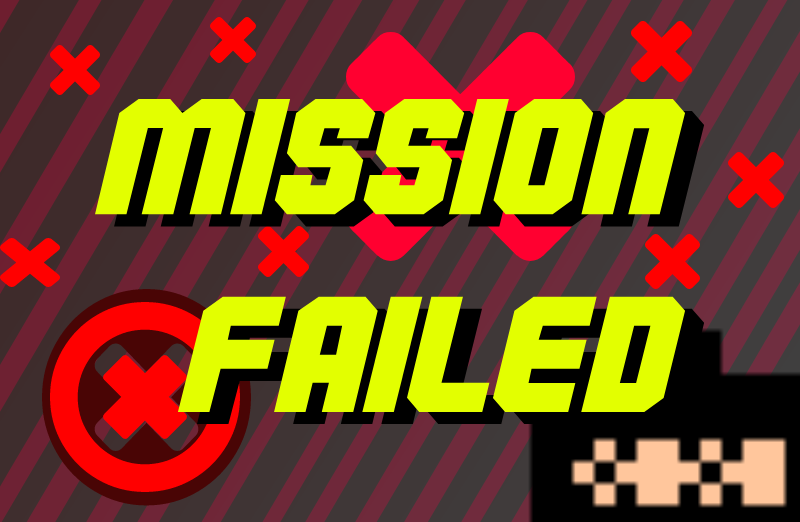
<style>
.page{position:relative;width:800px;height:522px;background:#e3ff00}
.page>*{position:absolute;margin:0}
.t1{font:164.7px "Commando";color:#e3ff00;scale:1.08 1}
.t2{font:164.7px "Commando";scale:1.08 1}
</style>
<div class="page">
<p class="t1" style="left:95px;top:98px;width:591px;height:315px;text-align:right">Mission<br>Failed</p>
<p class="t2" style="left:114px;top:111px;width:591px;height:314px;text-align:right">mission<br>failed</p>
</div>
